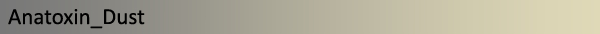
<style>
.page{position:relative;width:600px;height:34px}
.page>*{position:absolute;margin:0}
.t1{font:23px "Calibri";color:#000000}
</style>
<div class="page">
<p class="t1" style="left:8px;top:9px;width:137px;height:20px">Anatoxin_Dust</p>
</div>
